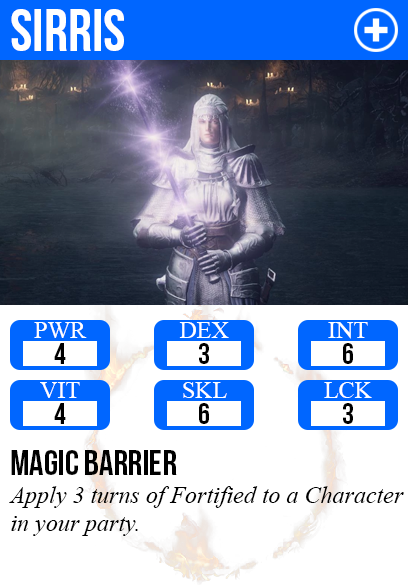
<style>
.page{position:relative;width:408px;height:585px;background:#ffffff}
.page>*{position:absolute;margin:0}
.t1{font:60px "BebasNeue";color:#ffffff}
.t2{font:24px "TimesNewRomanPSMT";color:#ffffff}
.t3{font:30px "BebasNeue";color:#000000}
.t4{font:36px "BebasNeue";color:#000000}
.t5{font:24px "TimesNewRomanPS-ItalicMT";color:#000000}
</style>
<div class="page">
<p class="t1" style="left:11px;top:9px;width:113px;height:42px">sirris</p>
<p class="t2" style="left:34px;top:322px;width:53px;height:16px">PWR</p>
<p class="t2" style="left:179px;top:322px;width:50px;height:16px">DEX</p>
<p class="t2" style="left:328px;top:322px;width:40px;height:17px">INT</p>
<p class="t3" style="left:54px;top:343px;width:12px;height:21px">4</p>
<p class="t3" style="left:199px;top:343px;width:10px;height:21px">3</p>
<p class="t3" style="left:343px;top:343px;width:10px;height:21px">6</p>
<p class="t2" style="left:40px;top:382px;width:40px;height:16px">VIT</p>
<p class="t2" style="left:183px;top:382px;width:44px;height:16px">SKL</p>
<p class="t2" style="left:324px;top:382px;width:48px;height:16px">LCK</p>
<p class="t3" style="left:54px;top:403px;width:12px;height:21px">4</p>
<p class="t3" style="left:199px;top:403px;width:10px;height:21px">6</p>
<p class="t3" style="left:343px;top:403px;width:10px;height:21px">3</p>
<p class="t4" style="left:11px;top:450px;width:166px;height:25px">magic barrier</p>
<p class="t5" style="left:9px;top:486px;width:395px;height:50px">Apply 3 turns of Fortified to a Character<br>in your party.</p>
</div>
